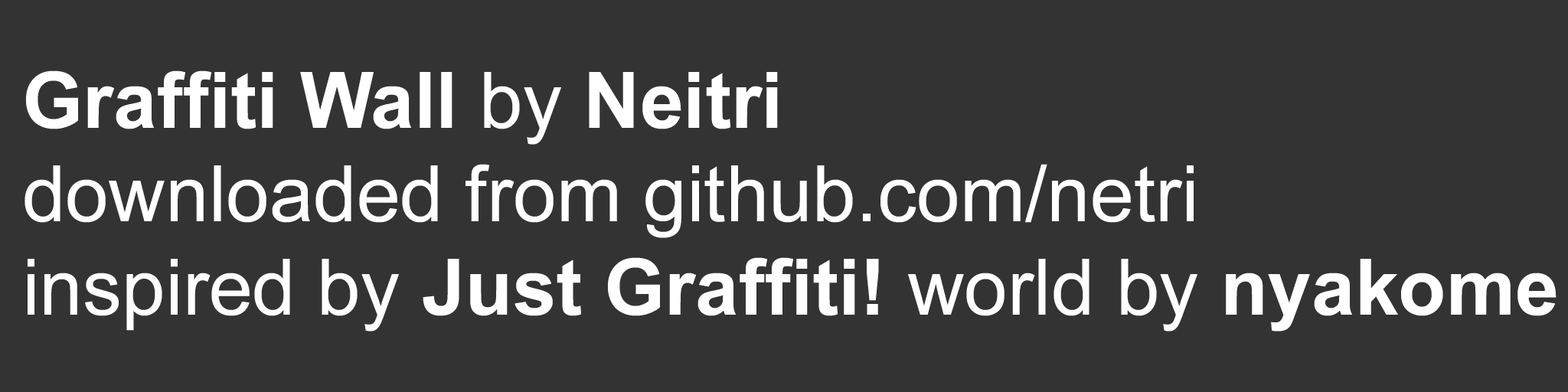
<style>
.page{position:relative;width:1568px;height:392px;background:#333333}
.page>*{position:absolute;margin:0}
.t1{font:78.1px "ArialMT";color:#ffffff}
.t2{font:78.1px "Arial-BoldMT";color:#ffffff}
</style>
<div class="page">
<p class="t1" style="left:24px;top:70px;width:1533px;height:262px"><span class="t2">Graffiti Wall</span> by <span class="t2">Neitri</span><br>downloaded from github.com/netri<br>inspired by <span class="t2">Just Graffitiǃ</span> world by <span class="t2">nyakome</span></p>
</div>
